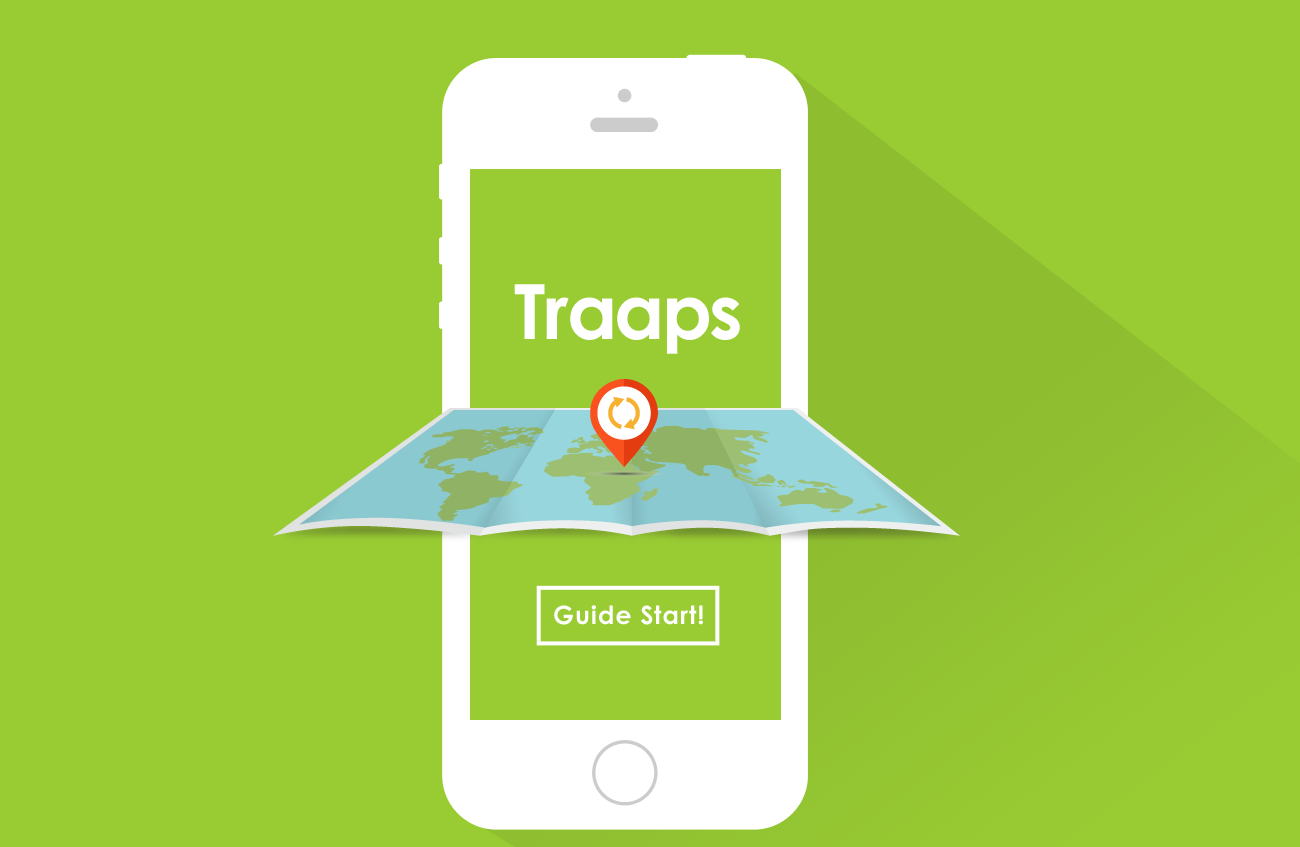
<style>
.page{position:relative;width:1300px;height:847px;background:#99cc33}
.page>*{position:absolute;margin:0}
.t1{font:76.2px "CenturyGothic-Bold";letter-spacing:0.04em;color:#ffffff}
.t2{font:24.9px "CenturyGothic-Bold";letter-spacing:0.04em;color:#ffffff}
</style>
<div class="page">
<p class="t1" style="left:514px;top:284px;width:226px;height:70px">Traaps</p>
<p class="t2" style="left:554px;top:605px;width:149px;height:20px">Guide Start!</p>
</div>
